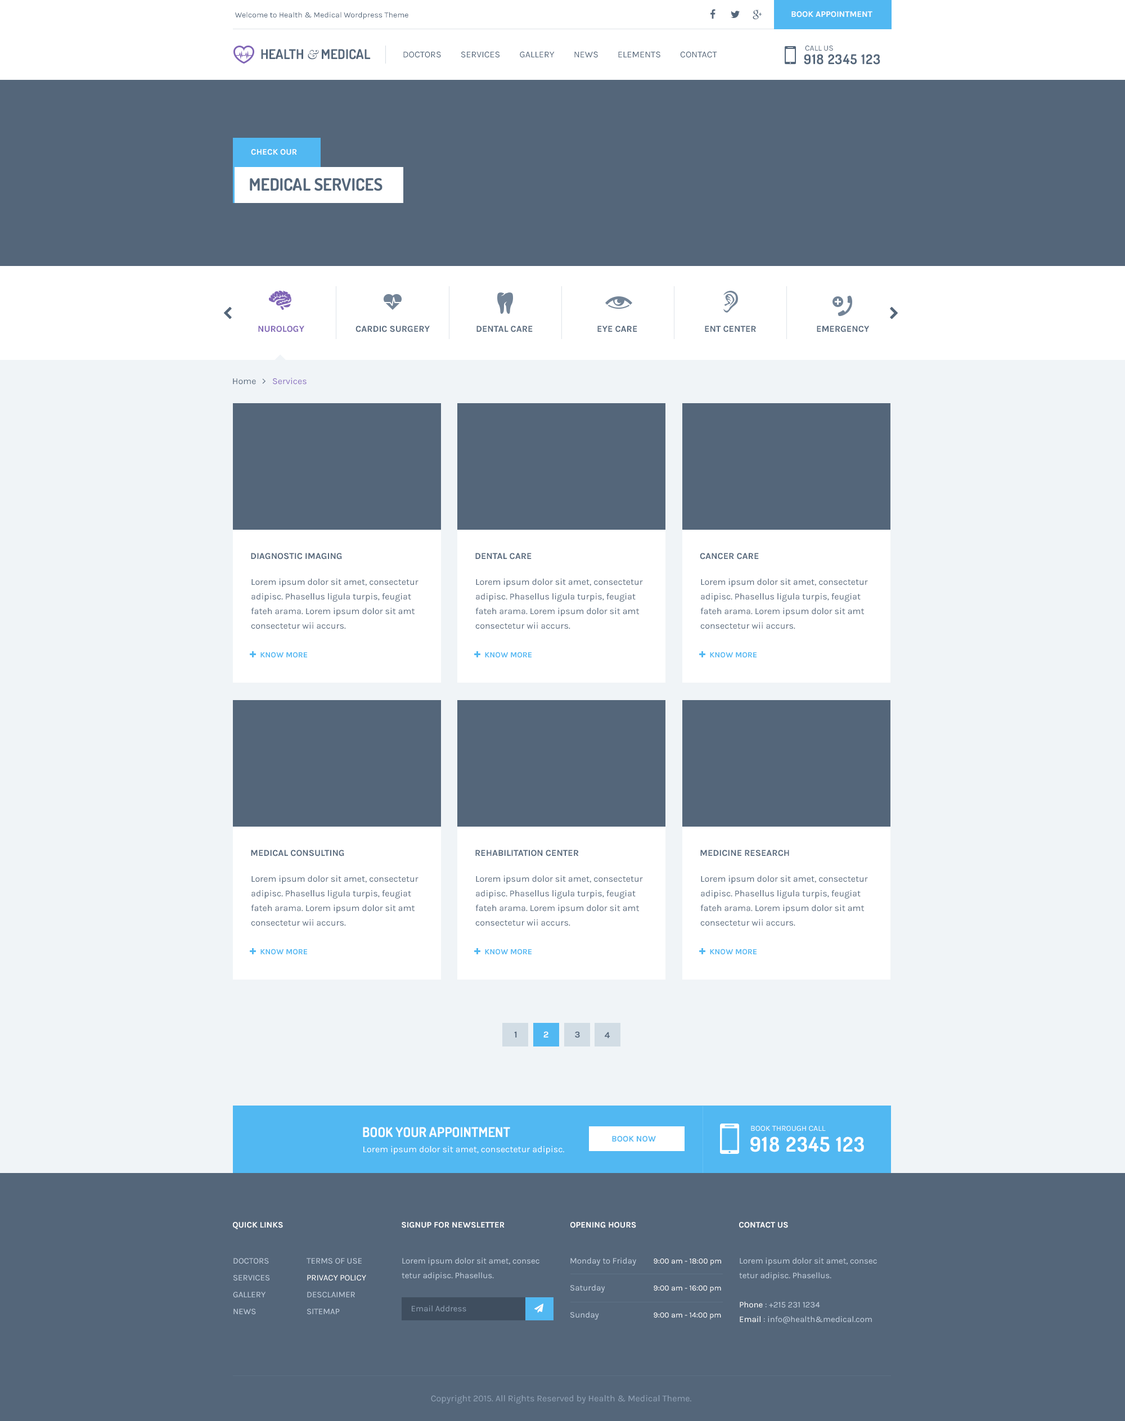
<style>
.page{position:relative;width:1125px;height:1421px;background:#54667a}
.page>*{position:absolute;margin:0}
.t1{font:7.9px "Karla-Regular";color:#54667a}
.t2{font:8.4px "Karla-Bold";color:#ffffff;text-transform:uppercase}
.t3{font:13.5px "Dosis-Bold";color:#54667a}
.t4{font:13.5px "Baskerville-Italic";color:#54667a}
.t5{font:9px "Karla-Regular";color:#54667a;text-transform:uppercase}
.t6{font:13.5px "Dosis-Bold";letter-spacing:0.05em;color:#54667a}
.t7{font:16.9px "Dosis-Bold";color:#54667a}
.t8{font:9px "Karla-Bold";color:#7f64b5;text-transform:uppercase}
.t9{font:9px "Karla-Bold";color:#54667a;text-transform:uppercase}
.t10{font:9px/14.6px "Karla-Regular";color:#54667a}
.t11{font:9px "Karla-Bold";color:#ffffff;text-transform:uppercase}
.t12{font:13.5px "Dosis-Bold";color:#ffffff}
.t13{font:7.9px "Karla-Regular";color:#ffffff}
.t14{font:8.4px "Karla-Bold";color:#51b8f2;text-transform:uppercase}
.t15{font:20.2px "Dosis-Bold";letter-spacing:0.05em;color:#ffffff}
.t16{font:9px "Karla-Regular";color:#ffffff}
.t17{font:8.4px/16.9px "Karla-Regular";color:#c2cfde;text-transform:uppercase}
.t18{font:8.4px/16.9px "Karla-Regular";color:#ffffff;text-transform:uppercase}
.t19{font:8.4px/14.6px "Karla-Regular";color:#c2cfde}
.t20{font:8.4px/27px "Karla-Regular";color:#c2cfde}
.t21{font:7.9px/27px "Karla-Regular";color:#ffffff}
.t22{font:8.4px/14.6px "Karla-Regular";color:#ffffff}
.t23{font:8.4px "Karla-Regular";color:#8e9fb2}
.t24{font:9px "Karla-Regular";color:#8fa1b5}
</style>
<div class="page">
<p class="t1" style="left:235px;top:12px;width:173px;height:8px">Welcome to Health &amp; Medical Wordpress Theme</p>
<p class="t2" style="left:791px;top:11px;width:81px;height:6px">BOOK APPOINTMENT</p>
<p class="t3" style="left:261px;top:49px;width:110px;height:11px">HEALTH <span class="t4">&amp;</span> MEDICAL</p>
<p class="t5" style="left:403px;top:51px;width:314px;height:7px">Doctors         Services         Gallery         News         Elements         Contact</p>
<p class="t6" style="left:804px;top:54px;width:76px;height:11px">918 2345 123</p>
<p class="t1" style="left:805px;top:46px;width:28px;height:5px">CALL US</p>
<p class="t2" style="left:251px;top:149px;width:46px;height:6px">CHECK OUR</p>
<p class="t7" style="left:250px;top:178px;width:132px;height:13px">MEDICAL SERVICES</p>
<p class="t8" style="left:258px;top:326px;width:46px;height:6px">NUROLOGY</p>
<p class="t9" style="left:356px;top:326px;width:74px;height:6px">CARDIC SURGERY</p>
<p class="t9" style="left:476px;top:326px;width:57px;height:6px">DENTAL CARE</p>
<p class="t9" style="left:597px;top:326px;width:40px;height:6px">EYE CARE</p>
<p class="t9" style="left:705px;top:326px;width:51px;height:6px">ENT CENTER</p>
<p class="t9" style="left:817px;top:326px;width:53px;height:6px">EMERGENCY</p>
<p class="t9" style="left:251px;top:553px;width:91px;height:7px">Diagnostic Imaging</p>
<p class="t9" style="left:475px;top:553px;width:57px;height:7px">Dental Care</p>
<p class="t9" style="left:700px;top:553px;width:59px;height:7px">Cancer Care</p>
<p class="t10" style="left:251px;top:579px;width:167px;height:50px">Lorem ipsum dolor sit amet, consectetur <br>adipisc. Phasellus ligula turpis, feugiat <br>fateh arama. Lorem ipsum dolor sit amt<br>consectetur wii accurs.</p>
<p class="t10" style="left:475px;top:579px;width:168px;height:50px">Lorem ipsum dolor sit amet, consectetur <br>adipisc. Phasellus ligula turpis, feugiat <br>fateh arama. Lorem ipsum dolor sit amt<br>consectetur wii accurs.</p>
<p class="t10" style="left:700px;top:579px;width:168px;height:50px">Lorem ipsum dolor sit amet, consectetur <br>adipisc. Phasellus ligula turpis, feugiat <br>fateh arama. Lorem ipsum dolor sit amt<br>consectetur wii accurs.</p>
<p class="t9" style="left:251px;top:850px;width:93px;height:7px">Medical Consulting</p>
<p class="t9" style="left:475px;top:850px;width:104px;height:7px">Rehabilitation Center</p>
<p class="t9" style="left:700px;top:850px;width:89px;height:7px">Medicine Research</p>
<p class="t10" style="left:251px;top:876px;width:167px;height:50px">Lorem ipsum dolor sit amet, consectetur <br>adipisc. Phasellus ligula turpis, feugiat <br>fateh arama. Lorem ipsum dolor sit amt<br>consectetur wii accurs.</p>
<p class="t10" style="left:475px;top:876px;width:168px;height:50px">Lorem ipsum dolor sit amet, consectetur <br>adipisc. Phasellus ligula turpis, feugiat <br>fateh arama. Lorem ipsum dolor sit amt<br>consectetur wii accurs.</p>
<p class="t10" style="left:700px;top:876px;width:168px;height:50px">Lorem ipsum dolor sit amet, consectetur <br>adipisc. Phasellus ligula turpis, feugiat <br>fateh arama. Lorem ipsum dolor sit amt<br>consectetur wii accurs.</p>
<p class="t9" style="left:514px;top:1032px;width:3px;height:6px">1</p>
<p class="t11" style="left:543px;top:1032px;width:5px;height:6px">2</p>
<p class="t9" style="left:575px;top:1032px;width:5px;height:6px">3</p>
<p class="t9" style="left:605px;top:1032px;width:5px;height:6px">4</p>
<p class="t12" style="left:363px;top:1127px;width:147px;height:11px">BOOK YOUR APPOINTMENT</p>
<p class="t13" style="left:751px;top:1126px;width:75px;height:6px">BOOK THROUGH CALL</p>
<p class="t14" style="left:612px;top:1136px;width:44px;height:6px">BOOK NOW</p>
<p class="t15" style="left:750px;top:1137px;width:114px;height:16px">918 2345 123</p>
<p class="t16" style="left:363px;top:1146px;width:201px;height:9px">Lorem ipsum dolor sit amet, consectetur adipisc.</p>
<p class="t2" style="left:233px;top:1222px;width:50px;height:8px">QUICK LINKS</p>
<p class="t2" style="left:402px;top:1222px;width:103px;height:6px">Signup For Newsletter</p>
<p class="t2" style="left:570px;top:1222px;width:66px;height:6px">Opening Hours</p>
<p class="t2" style="left:739px;top:1222px;width:49px;height:6px">Contact Us</p>
<p class="t17" style="left:233px;top:1258px;width:36px;height:57px">Doctors         <br>Services         <br>Gallery         <br>News</p>
<p class="t17" style="left:307px;top:1258px;width:59px;height:57px">Terms of Use<br><span class="t18">Privacy Policy<br></span>Desclaimer<br>Sitemap</p>
<p class="t19" style="left:402px;top:1258px;width:137px;height:23px">Lorem ipsum dolor sit amet, consec<br>tetur adipisc. Phasellus.</p>
<p class="t20" style="left:570px;top:1258px;width:66px;height:62px">Monday to Friday<br>Saturday<br>Sunday</p>
<p class="t21" style="left:654px;top:1259px;width:67px;height:61px">9:00 am - 18:00 pm<br>9:00 am - 16:00 pm<br>9:00 am - 14:00 pm</p>
<p class="t19" style="left:739px;top:1258px;width:138px;height:66px">Lorem ipsum dolor sit amet, consec<br>tetur adipisc. Phasellus.<br><br><span class="t22">Phone</span> : +215 231 1234<br><span class="t22">Email</span> : info@health&amp;medical.com</p>
<p class="t23" style="left:412px;top:1306px;width:54px;height:6px">Email Address</p>
<p class="t24" style="left:431px;top:1396px;width:260px;height:8px">Copyright 2015. All Rights Reserved by Health &amp; Medical Theme.</p>
</div>
